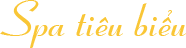
<style>
.page{position:relative;width:186px;height:48px;background:#ffffff}
.page>*{position:absolute;margin:0}
.t1{font:50px "UVNKieuBold";color:#f9c636}
</style>
<div class="page">
<p class="t1" style="left:0px;top:0px;width:186px;height:48px">Spa tiêu biểu</p>
</div>
